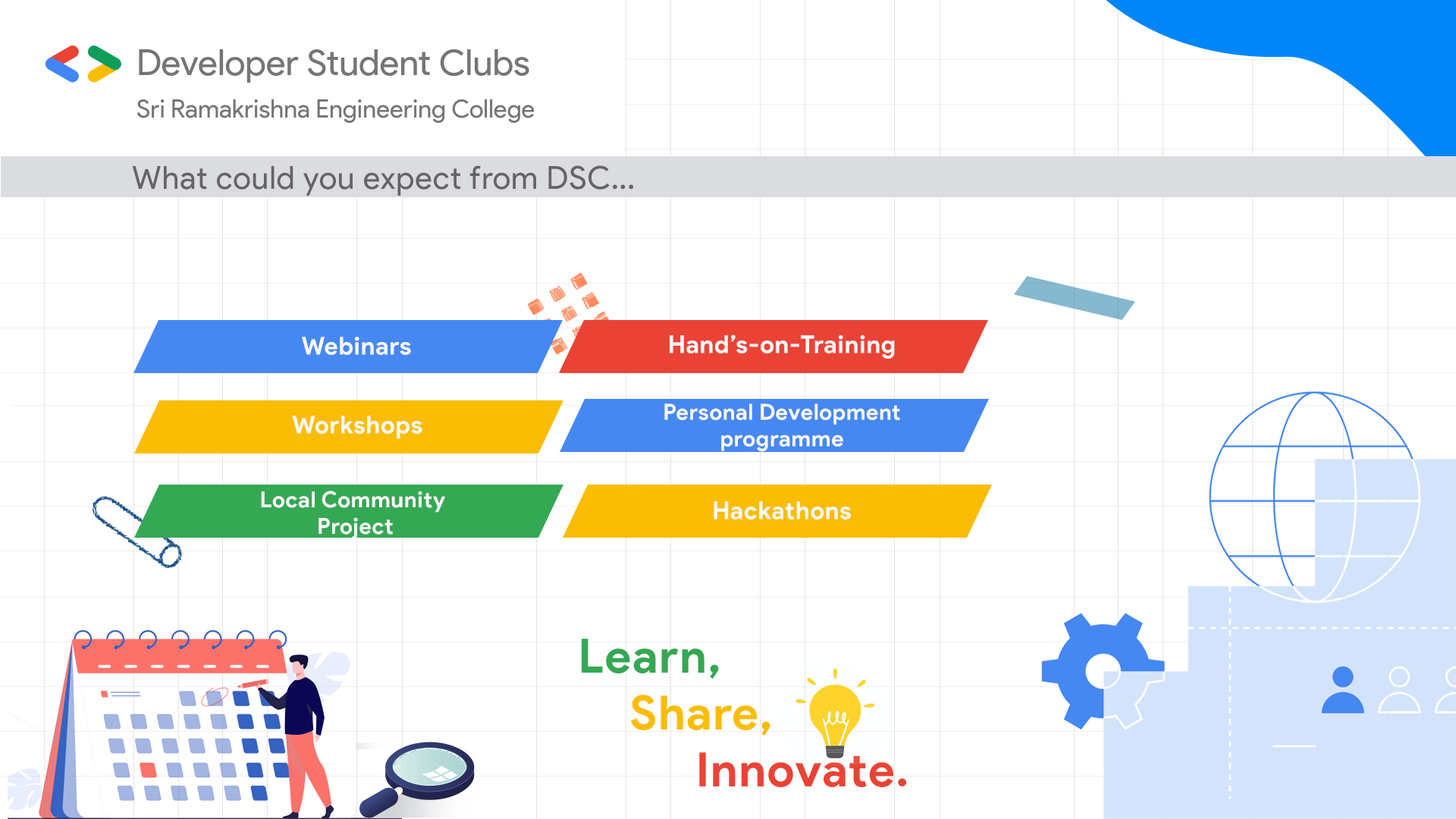
<style>
.page{position:relative;width:1456px;height:819px;background:#ffffff}
.page>*{position:absolute;margin:0}
.t1{font:31.6px "ProductSans-Regular";letter-spacing:0.025em;color:#656464}
.t2{font:24.6px "ProductSans-Bold";letter-spacing:0.025em;color:#f9f8f8}
.t3{font:22.1px "ProductSans-Bold";letter-spacing:0.025em;color:#f9f8f8}
.t4{font:47.4px "ProductSans-Bold";letter-spacing:0.025em;color:#ea4335}
.t5{font:47.4px "ProductSans-Bold";letter-spacing:0.025em;color:#34a853}
.t6{font:47.4px "ProductSans-Bold";letter-spacing:0.025em;color:#fbbc04}
</style>
<div class="page">
<p class="t1" style="left:132px;top:165px;width:501px;height:31px">What could you expect from DSC...</p>
<p class="t2" style="left:302px;top:337px;width:109px;height:18px">Webinars</p>
<p class="t2" style="left:670px;top:334px;width:225px;height:25px">Hand’s-on-Training</p>
<p class="t3" style="left:664px;top:403px;width:236px;height:49px;text-align:center">Personal Development<br>programme</p>
<p class="t2" style="left:292px;top:416px;width:130px;height:23px">Workshops</p>
<p class="t3" style="left:261px;top:491px;width:184px;height:48px;text-align:center">Local Community <br>Project</p>
<p class="t2" style="left:714px;top:501px;width:137px;height:18px">Hackathons</p>
<p class="t4" style="left:582px;top:639px;width:324px;height:148px;text-align:center"><span class="t5">Learn,<br></span><span class="t6">         Share,<br></span>    Innovate.</p>
</div>
